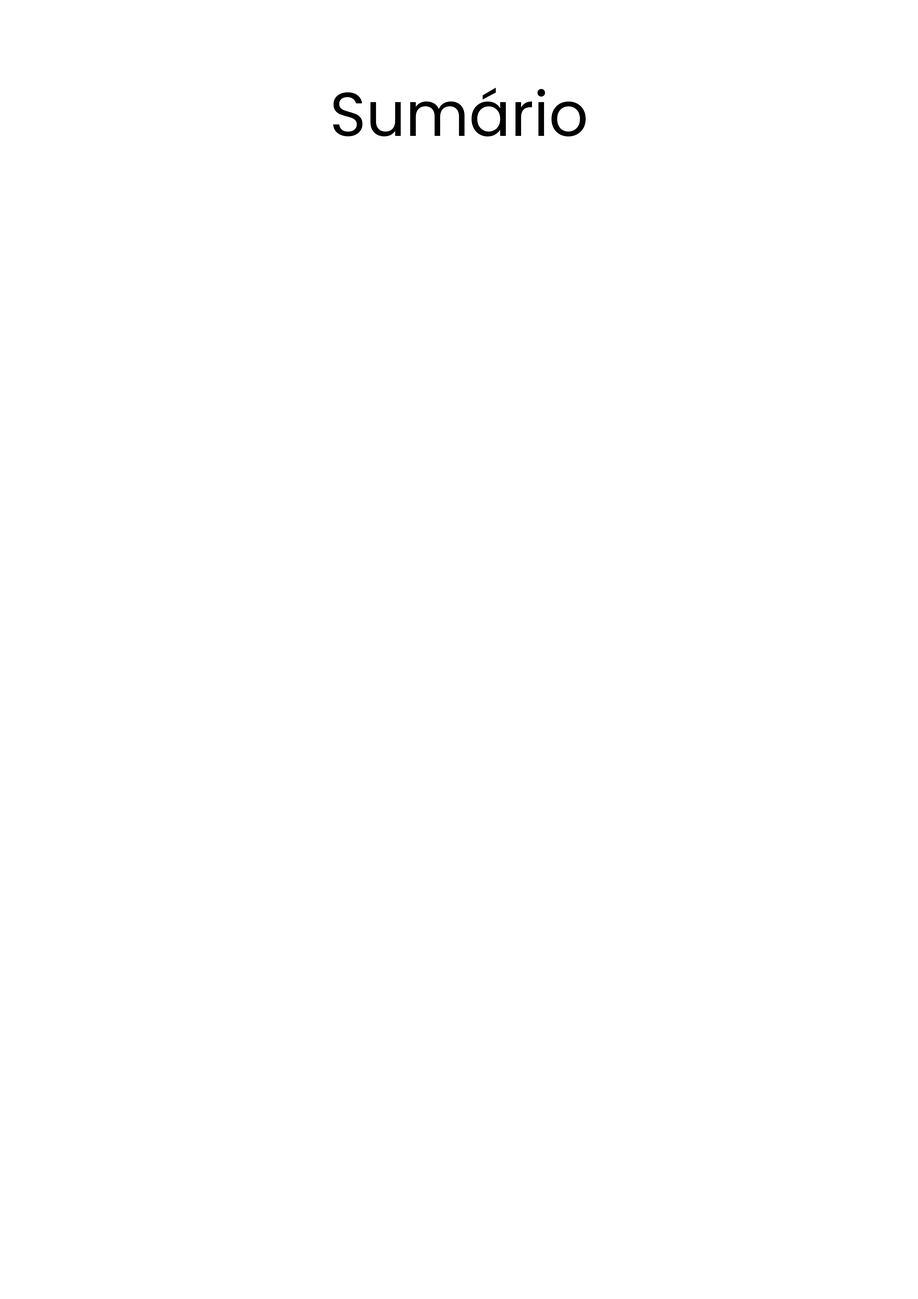
<style>
.page{position:relative;width:918px;height:1299px;background:#ffffff}
.page>*{position:absolute;margin:0}
.t1{font:61.7px "Poppins-Regular";color:#000000}
</style>
<div class="page">
<p class="t1" style="left:333px;top:88px;width:253px;height:48px">Sumário</p>
</div>
